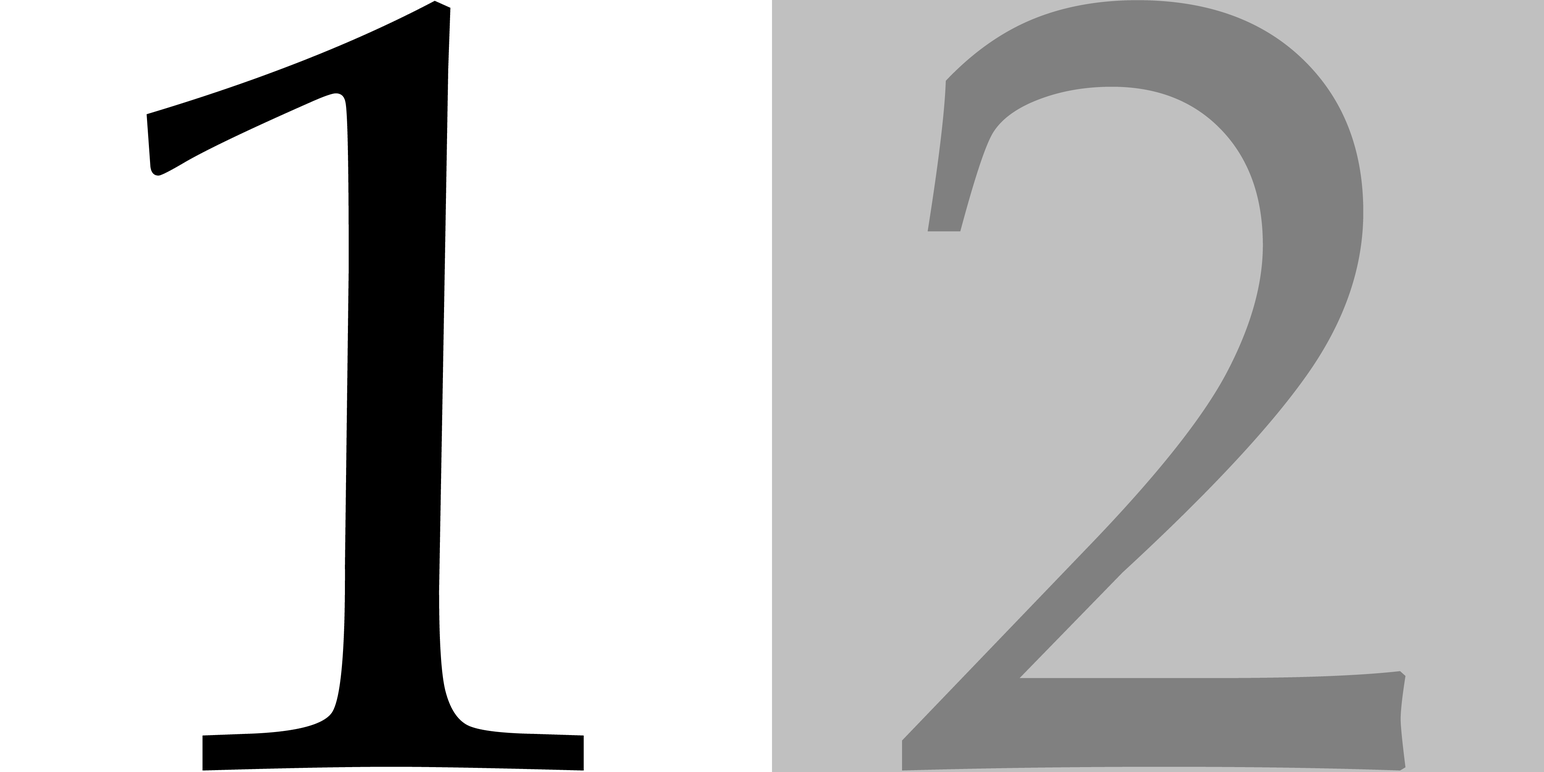
<style>
.page{position:relative;width:1544px;height:772px;background:#ffffff}
.page>*{position:absolute;margin:0}
.t1{font:1100.9px "BookAntiqua";letter-spacing:-0.025em;color:#000000}
.t2{font:1093.4px "BookAntiqua";letter-spacing:-0.025em;color:#808080}
</style>
<div class="page">
<p class="t1" style="left:147px;top:0px;width:1259px;height:771px">1 <span class="t2">2</span></p>
</div>
